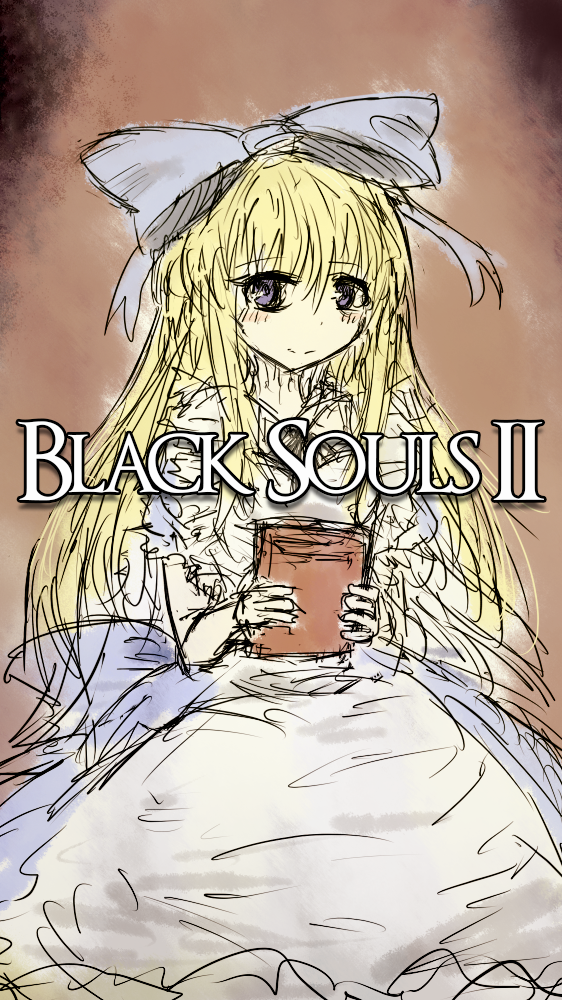
<style>
.page{position:relative;width:562px;height:1000px}
.page>*{position:absolute;margin:0}
.t1{font:105px "OptimusPrinceps";letter-spacing:-0.075em;color:#fdfdfd}
</style>
<div class="page">
<p class="t1" style="left:18px;top:419px;width:526px;height:83px">Black Souls II</p>
</div>
